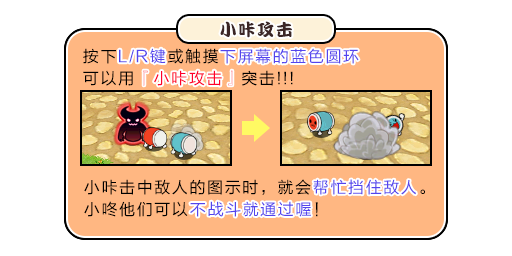
<style>
.page{position:relative;width:512px;height:256px;background:#ffffff}
.page>*{position:absolute;margin:0}
.t1{font:17px "DFPKanTingLiuW9";letter-spacing:0.1em;color:#3b2626}
.t2{font:16px/22px "FZLTHJW--GB1-0";letter-spacing:0.1em;color:#5444ed}
.t3{font:16px/22px "FZLTHJW--GB1-0";letter-spacing:0.1em;color:#000000}
.t4{font:16px/22px "FZLTHJW--GB1-0";letter-spacing:0.1em;color:#ff002a}
.t5{font:16px "FZLTHJW--GB1-0";letter-spacing:0.1em;color:#5444ed}
.t6{font:16px "FZLTHJW--GB1-0";letter-spacing:0.1em;color:#ff002a}
</style>
<div class="page">
<p class="t1" style="left:220px;top:21px;width:72px;height:17px">小咔攻击</p>
<p class="t2" style="left:83px;top:48px;width:276px;height:38px"><span class="t3">按下</span>L/R键<span class="t3">或触摸</span>下屏幕的蓝色圆环<br><span class="t3">可以用</span><span class="t4">『小卡攻击』</span><span class="t3">突击!!!</span></p>
<p class="t5" style="left:119px;top:48px;width:47px;height:16px">L/R键</p>
<p class="t5" style="left:220px;top:48px;width:139px;height:16px">下屏幕的蓝色圆环</p>
<p class="t6" style="left:143px;top:70px;width:90px;height:16px">『小咔攻击』</p>
<p class="t3" style="left:84px;top:179px;width:341px;height:38px">小咔击中敌人的图示时，就会<span class="t2">帮忙挡住敌人</span>。<br>小咚他们可以<span class="t2">不战斗就通过喔</span>！</p>
<p class="t5" style="left:313px;top:179px;width:103px;height:16px">帮忙挡住敌人</p>
<p class="t5" style="left:190px;top:201px;width:121px;height:16px">不战斗就通过喔</p>
</div>
